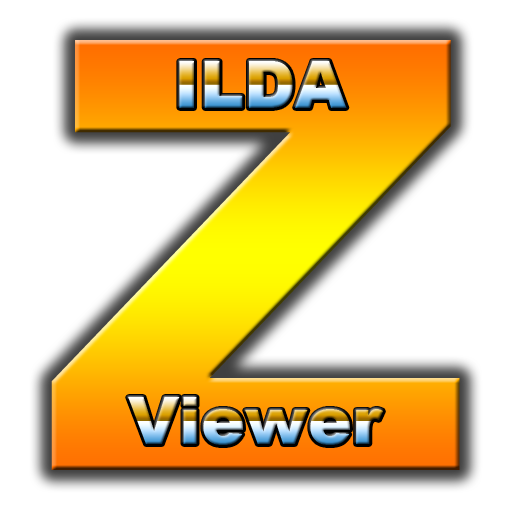
<style>
.page{position:relative;width:512px;height:512px;background:#ffffff}
.page>*{position:absolute;margin:0}
.t1{font:600px "Arial-Black"}
.t2{font:66px "Arial-Black"}
</style>
<div class="page">
<p class="t1" style="left:51px;top:40px;width:409px;height:430px">Z</p>
<p class="t2" style="left:179px;top:61px;width:168px;height:47px">ILDA</p>
<p class="t2" style="left:128px;top:397px;width:255px;height:48px">Viewer</p>
</div>
